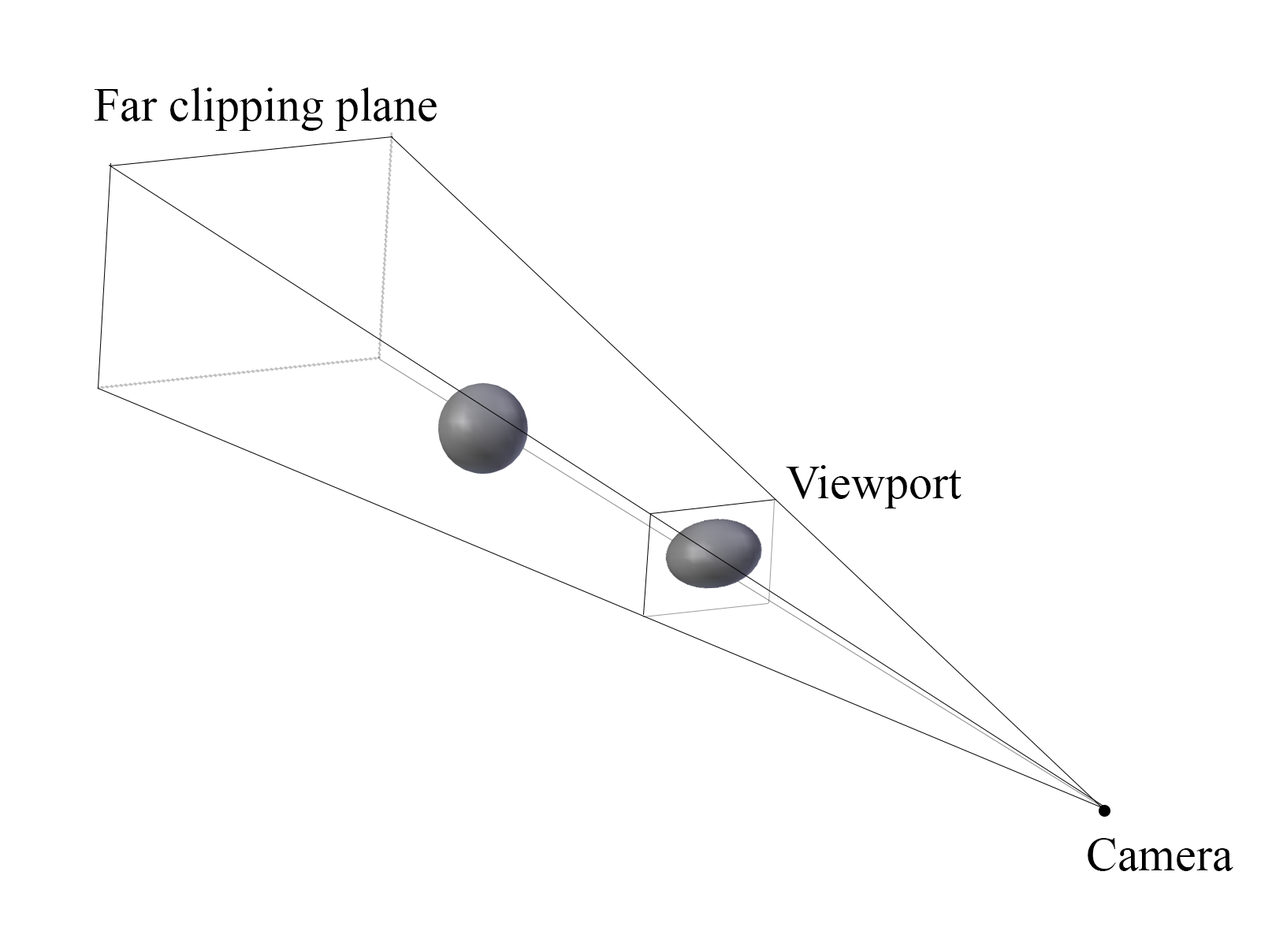
<style>
.page{position:relative;width:1261px;height:946px;background:#ffffff}
.page>*{position:absolute;margin:0}
.t1{font:47.3px "TimesNewRomanPSMT";color:#000000}
</style>
<div class="page">
<p class="t1" style="left:94px;top:87px;width:343px;height:44px">Far clipping plane</p>
<p class="t1" style="left:786px;top:465px;width:175px;height:43px">Viewport</p>
<p class="t1" style="left:1088px;top:838px;width:145px;height:33px">Camera</p>
</div>
